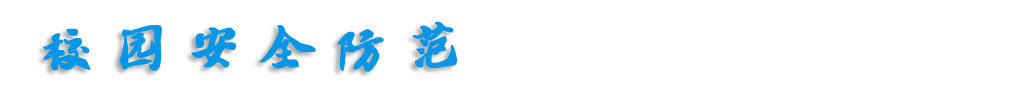
<style>
.page{position:relative;width:1024px;height:96px;background:#ffffff}
.page>*{position:absolute;margin:0}
.t1{font:60px "inpin-chibifuti";letter-spacing:0.2em;color:#0996e7;font-weight:bold}
</style>
<div class="page">
<p class="t1" style="left:43px;top:21px;width:414px;height:51px">校园安全防范</p>
</div>
